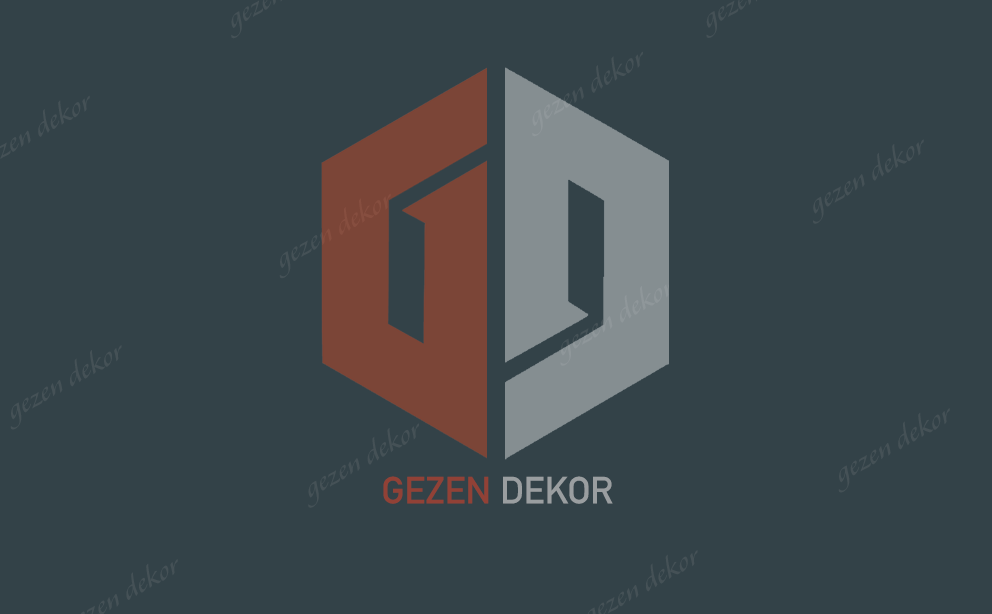
<style>
.page{position:relative;width:992px;height:614px;background:#334248}
.page>*{position:absolute;margin:0}
.t1{font:37.5px "DINAlternate-Bold"}
</style>
<div class="page">
<p class="t1" style="left:383px;top:476px;width:230px;height:28px">GEZEN DEKOR</p>
</div>
